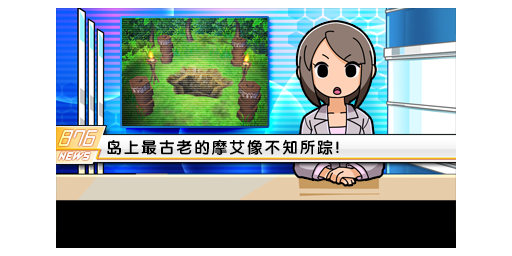
<style>
.page{position:relative;width:512px;height:256px;background:#ffffff}
.page>*{position:absolute;margin:0}
.t1{font:16px "FZY4K--GBK1-0";letter-spacing:0.1em;color:#000000}
</style>
<div class="page">
<p class="t1" style="left:107px;top:139px;width:232px;height:16px">岛上最古老的摩艾像不知所踪!</p>
</div>
